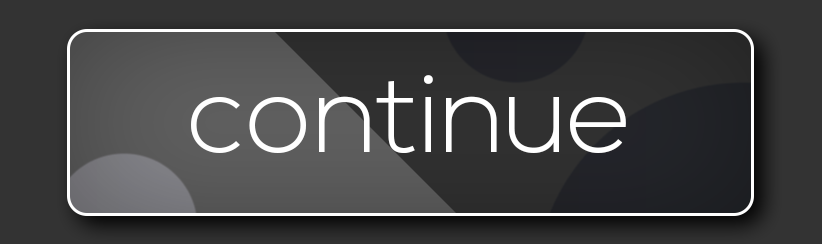
<style>
.page{position:relative;width:822px;height:244px}
.page>*{position:absolute;margin:0}
.t1{font:110.1px "NexaLight";color:#ffffff}
</style>
<div class="page">
<p class="t1" style="left:191px;top:75px;width:435px;height:78px">continue</p>
</div>
